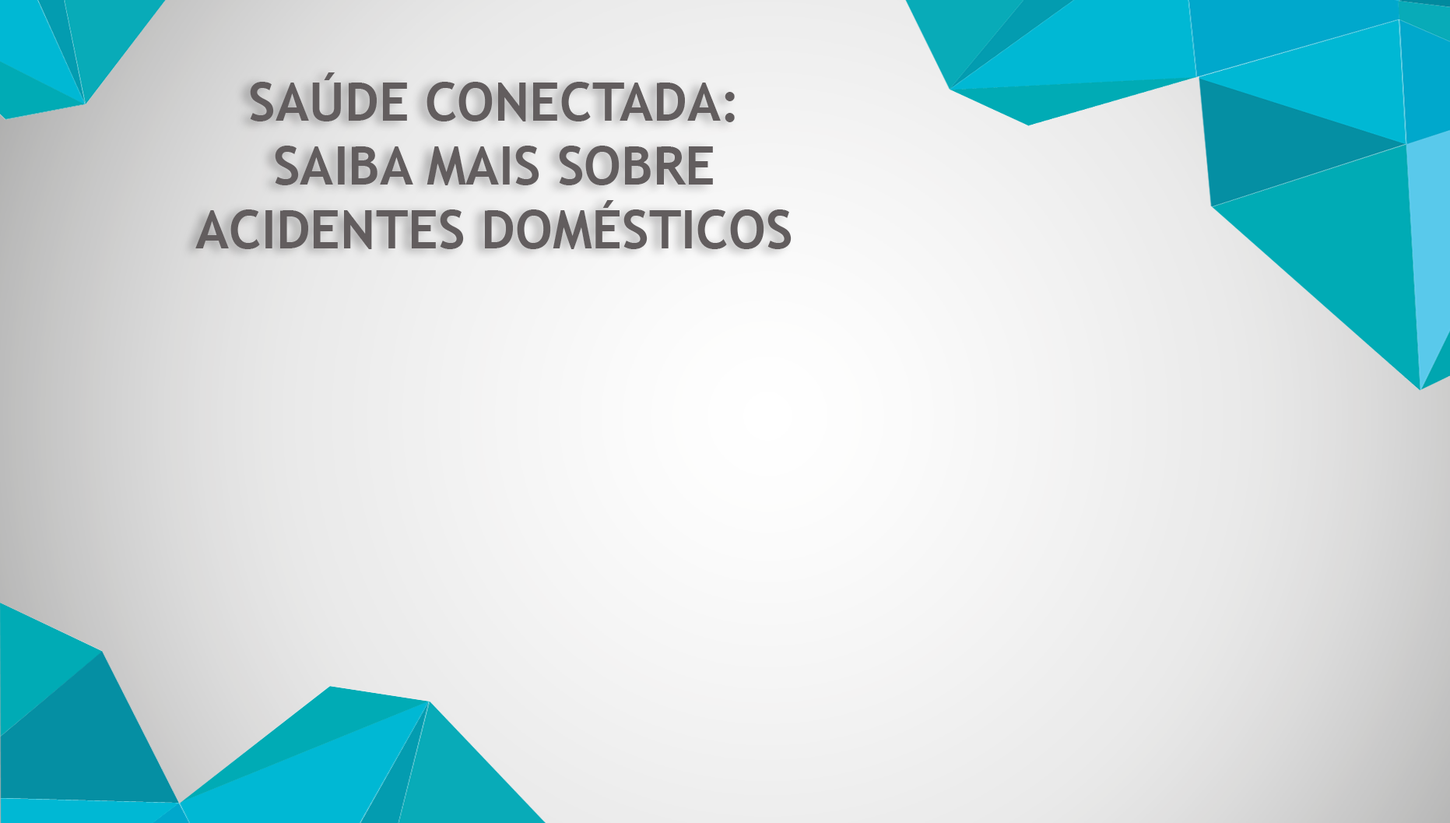
<style>
.page{position:relative;width:1450px;height:823px}
.page>*{position:absolute;margin:0}
.t1{font:52.9px "TrebuchetMS-Bold";color:#625d5e}
</style>
<div class="page">
<p class="t1" style="left:195px;top:72px;width:596px;height:177px;text-align:center">SAÚDE CONECTADA:<br>SAIBA MAIS SOBRE<br>ACIDENTES DOMÉSTICOS</p>
</div>
